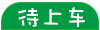
<style>
.page{position:relative;width:100px;height:30px;background:#009944}
.page>*{position:absolute;margin:0}
.t1{font:24px "DFWaWaSC-W5";color:#ffffff}
</style>
<div class="page">
<p class="t1" style="left:18px;top:7px;width:67px;height:20px">待上车</p>
</div>
